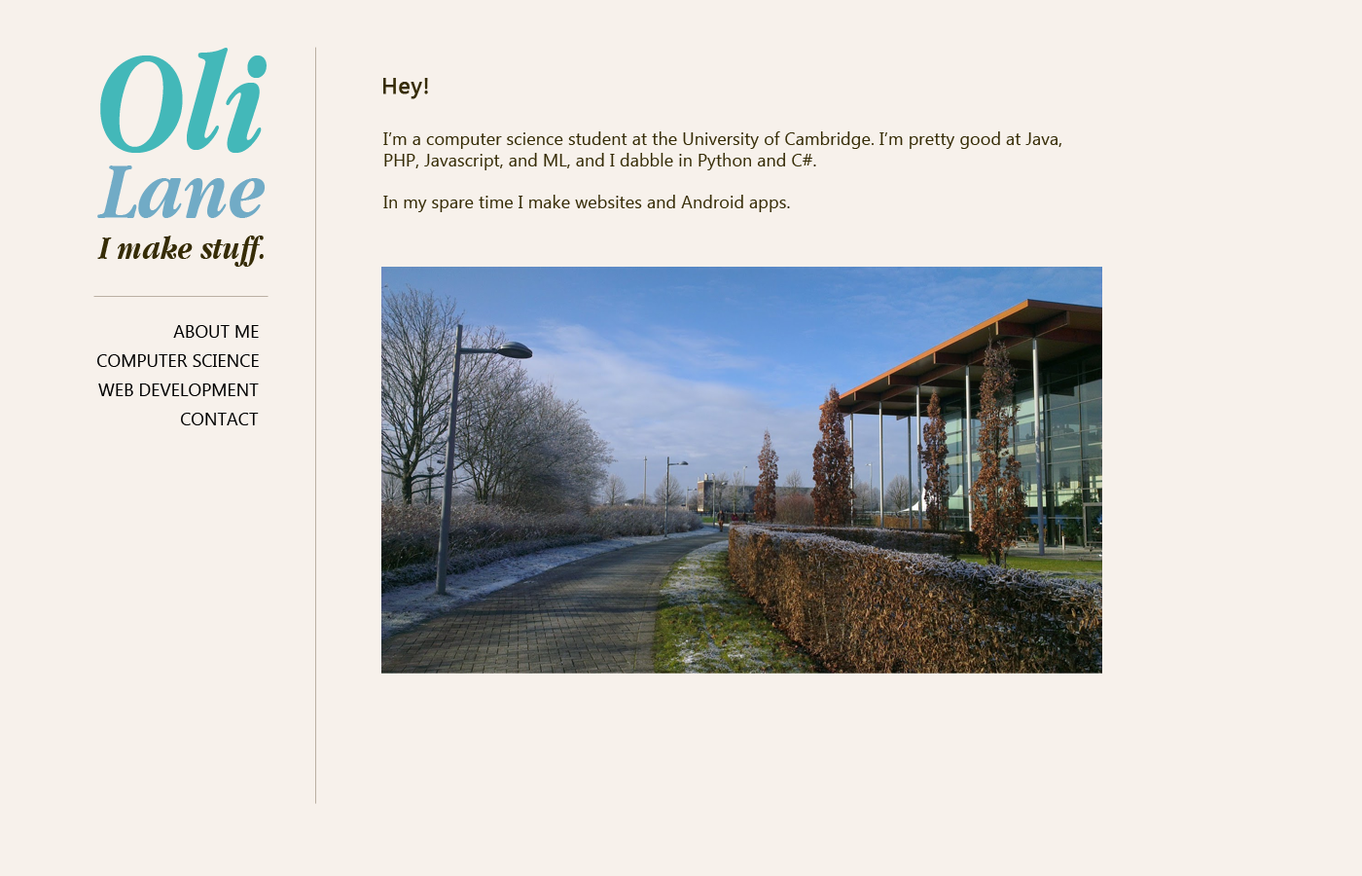
<style>
.page{position:relative;width:1362px;height:876px;background:#f7f1eb}
.page>*{position:absolute;margin:0}
.t1{font:145.3px "AppleGaramond-BoldItalic";letter-spacing:0.005em;color:#43b8b9}
.t2{font:22.8px "SegoeUI";letter-spacing:0.005em;color:#362c06;font-weight:bold}
.t3{font:17.5px "SegoeUI";letter-spacing:0.005em;color:#362c06}
.t4{font:84.9px "AppleGaramond-BoldItalic";letter-spacing:0.005em;color:#71abc6}
.t5{font:34.3px "AppleGaramond-BoldItalic";letter-spacing:0.005em;color:#362c06}
.t6{font:17.5px "SegoeUI";letter-spacing:0.005em;color:#000000;text-transform:uppercase}
</style>
<div class="page">
<p class="t1" style="left:100px;top:48px;width:167px;height:105px">Oli</p>
<p class="t2" style="left:383px;top:78px;width:45px;height:21px">Hey!</p>
<p class="t3" style="left:383px;top:131px;width:678px;height:81px">I’m a computer science student at the University of Cambridge. I’m pretty good at Java, PHP, Javascript, and ML, and I dabble in Python and C#.<br><br>In my spare time I make websites and Android apps.</p>
<p class="t4" style="left:97px;top:165px;width:169px;height:53px">Lane</p>
<p class="t5" style="left:97px;top:235px;width:167px;height:32px">I make stuff.</p>
<p class="t6" style="left:173px;top:325px;width:86px;height:13px">About me</p>
<p class="t6" style="left:97px;top:354px;width:162px;height:13px">Computer Science</p>
<p class="t6" style="left:98px;top:383px;width:161px;height:13px">Web Development</p>
<p class="t6" style="left:181px;top:412px;width:78px;height:13px">Contact</p>
</div>
